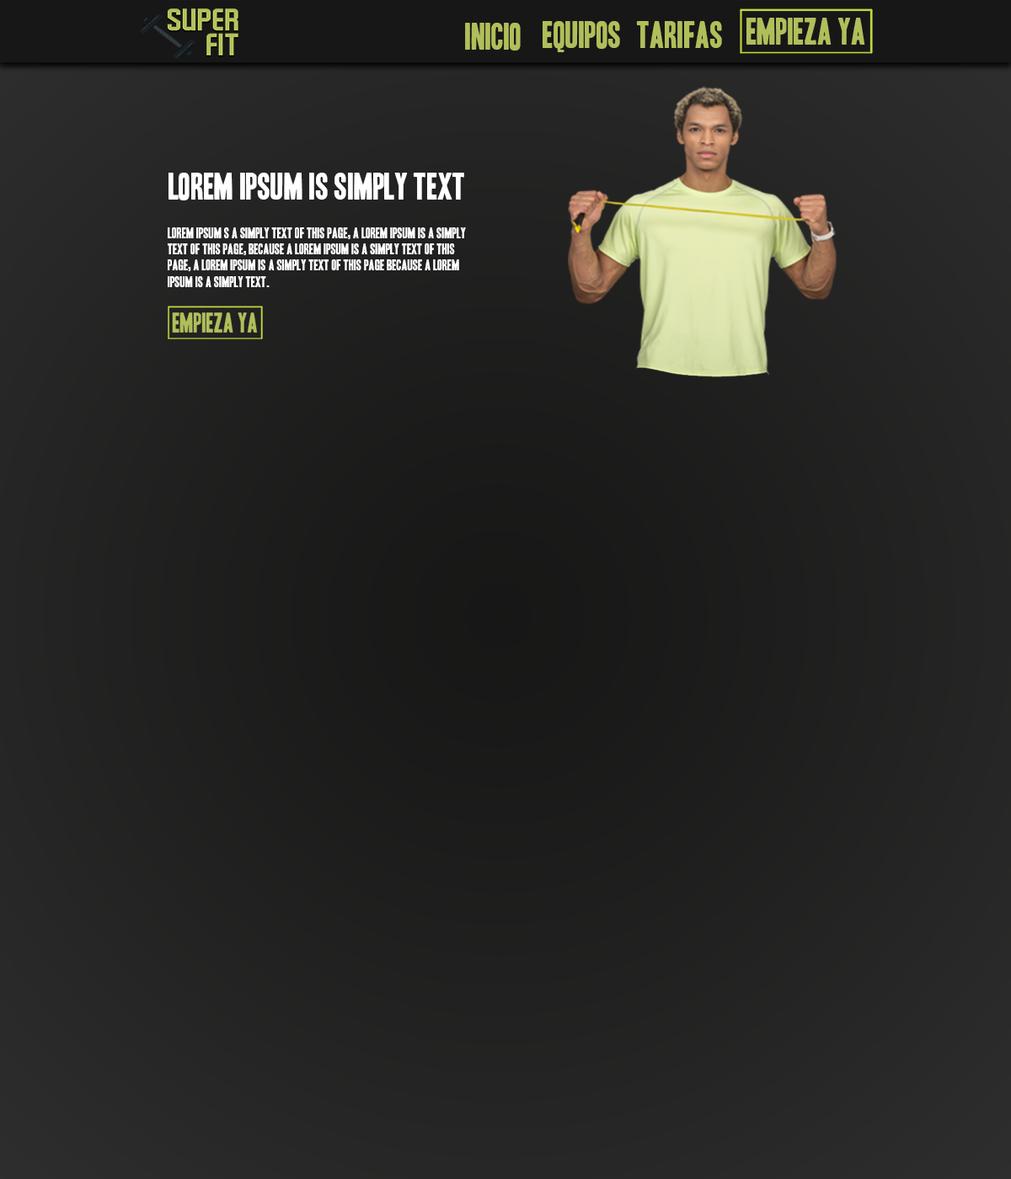
<style>
.page{position:relative;width:1011px;height:1179px}
.page>*{position:absolute;margin:0}
.t1{font:33.7px "HeadlineOneHPLHS";color:#b1be5a}
.t2{font:33.7px "HeadlineOneHPLHS";color:#ffffff}
.t3{font:13.5px "HeadlineOneHPLHS";color:#ffffff}
</style>
<div class="page">
<p class="t1" style="left:465px;top:23px;width:56px;height:28px">INICIO</p>
<p class="t1" style="left:543px;top:21px;width:77px;height:31px">EQUIPOS</p>
<p class="t1" style="left:636px;top:21px;width:86px;height:27px">TARIFAS</p>
<p class="t2" style="left:168px;top:173px;width:296px;height:28px">lorem ipsum is simply text</p>
<p class="t3" style="left:168px;top:227px;width:298px;height:60px">lOREM IPSUM S A SIMPLY TEXT OF THIS PAGE, A LOREM IPSUM IS A SIMPLY<br>TEXT OF THIS PAGE, BECAUSE A LOREM IPSUM IS A SIMPLY TEXT OF THIS<br>PAGE, A LOREM IPSUM IS A SIMPLY TEXT OF THIS PAGE BECAUSE A LOREM <br>IPSUM IS A SIMPLY TEXT.</p>
</div>
